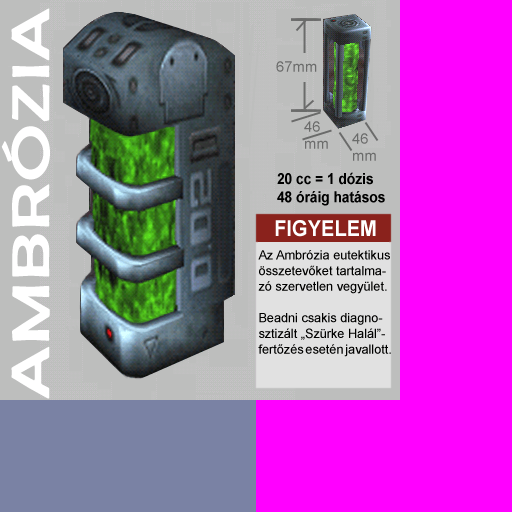
<style>
.page{position:relative;width:512px;height:512px;background:#ff00ff}
.page>*{position:absolute;margin:0}
.t1{font:53px "BerlinSansFB-Reg";color:#ffffff;font-weight:bold;scale:1.48 1}
.t2{font:15.3px "Arial-BoldMT";color:#000000;scale:0.9 1}
.t3{font:21.8px "Arial-BoldMT";color:#ffffff;scale:0.92 1}
.t4{font:13.1px "ArialMT";color:#010100;scale:0.97 1}
</style>
<div class="page">
<p class="t1" style="left:1px;top:8px;width:49px;height:391px;rotate:-90deg">AMBRÓZIA</p>
<p class="t2" style="left:277px;top:172px;width:108px;height:34px">20 cc = 1 dózis<br>48 óráig hatásos</p>
<p class="t3" style="left:275px;top:220px;width:101px;height:17px">FIGYELEM</p>
<p class="t4" style="left:258px;top:250px;width:133px;height:107px">Az Ambrózia eutektikus<br>összetevőket tartalma-<br>zó szervetlen vegyület. <br><br>Beadni csakis diagno-<br>sztizált „Szürke Halál”-<br>fertőzés esetén javallott.</p>
</div>
